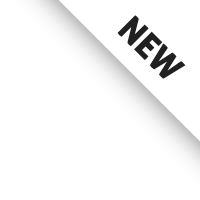
<style>
.page{position:relative;width:200px;height:200px;background:#ffffff}
.page>*{position:absolute;margin:0}
.t1{font:35px "AllerDisplay";color:#212121}
</style>
<div class="page">
<p class="t1" style="left:117px;top:15px;width:69px;height:64px;rotate:45deg">NEW</p>
</div>
